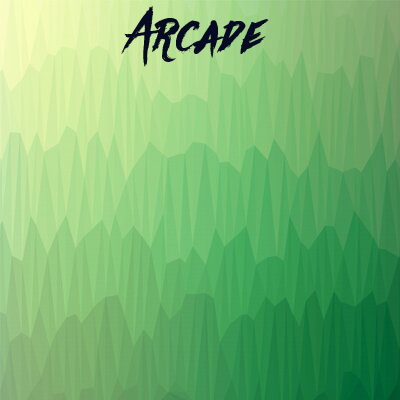
<style>
.page{position:relative;width:400px;height:400px}
.page>*{position:absolute;margin:0}
.t1{font:60px "Againts";color:#131936}
.t2{font:60px "Againts";color:#060b23}
</style>
<div class="page">
<p class="t1" style="left:121px;top:6px;width:148px;height:61px">Arcade</p>
<p class="t2" style="left:121px;top:6px;width:148px;height:61px">Arcade</p>
</div>
